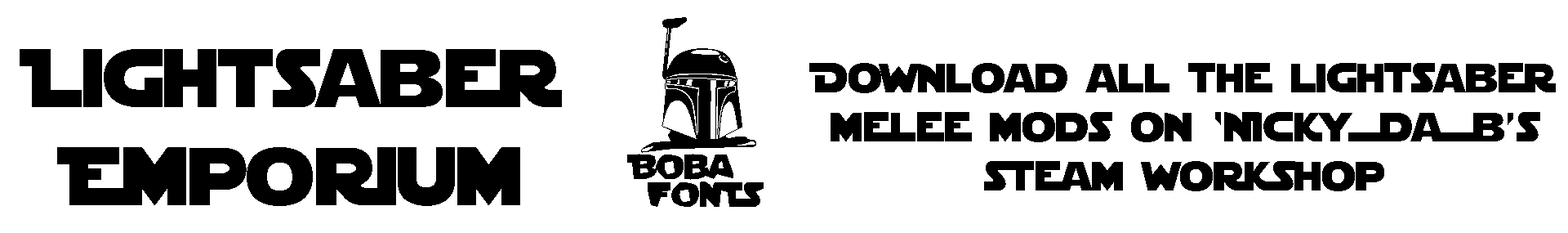
<style>
.page{position:relative;width:1568px;height:233px;background:#ffffff}
.page>*{position:absolute;margin:0}
.t1{font:119.2px "StarJediSpecialEdition";color:#000000}
.t2{font:81.7px "StarJediSpecialEdition";color:#000000}
.t3{font:40.8px "StarJediSpecialEdition";color:#000000}
</style>
<div class="page">
<p class="t1" style="left:627px;top:17px;width:137px;height:190px">_</p>
<p class="t2" style="left:20px;top:49px;width:542px;height:157px;text-align:center">Lightsaber<br>Emporium</p>
<p class="t3" style="left:809px;top:63px;width:747px;height:128px;text-align:center">Download all the lightsaber melee mods on ‘Nicky=da=b’s steam workshop</p>
</div>
